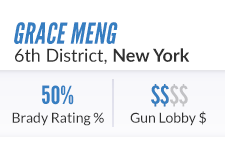
<style>
.page{position:relative;width:225px;height:150px;background:#ffffff}
.page>*{position:absolute;margin:0}
.t1{font:29.1px "LeagueGothic-Regular";letter-spacing:0.01em;color:#367ec1;text-transform:uppercase;font-style:italic}
.t2{font:18px "Lato-Regular";color:#313131}
.t3{font:18px "Lato-Bold";color:#313131}
.t4{font:25px "LeagueGothic-Regular";color:#367ec1;text-transform:uppercase;scale:1.11 1}
.t5{font:25px "LeagueGothic-Regular";text-transform:uppercase;scale:1.11 1}
.t6{font:14px "Lato-Regular";color:#303030}
</style>
<div class="page">
<p class="t1" style="left:14px;top:22px;width:104px;height:22px">grace meng</p>
<p class="t2" style="left:15px;top:48px;width:175px;height:16px">6th District, <span class="t3">New York</span></p>
<p class="t4" style="left:42px;top:85px;width:32px;height:20px">50%</p>
<p class="t5" style="left:151px;top:84px;width:37px;height:23px">$$$$</p>
<p class="t5" style="left:151px;top:84px;width:37px;height:23px">$$$$</p>
<p class="t6" style="left:12px;top:112px;width:92px;height:14px">Brady Rating %</p>
<p class="t6" style="left:130px;top:111px;width:76px;height:15px">Gun Lobby $</p>
</div>
